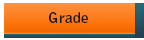
<style>
.page{position:relative;width:144px;height:40px}
.page>*{position:absolute;margin:0}
.t1{font:13.9px "BellGothicStd-Bold";color:#181818;scale:1.15 1}
</style>
<div class="page">
<p class="t1" style="left:49px;top:12px;width:39px;height:11px">Grade</p>
</div>
